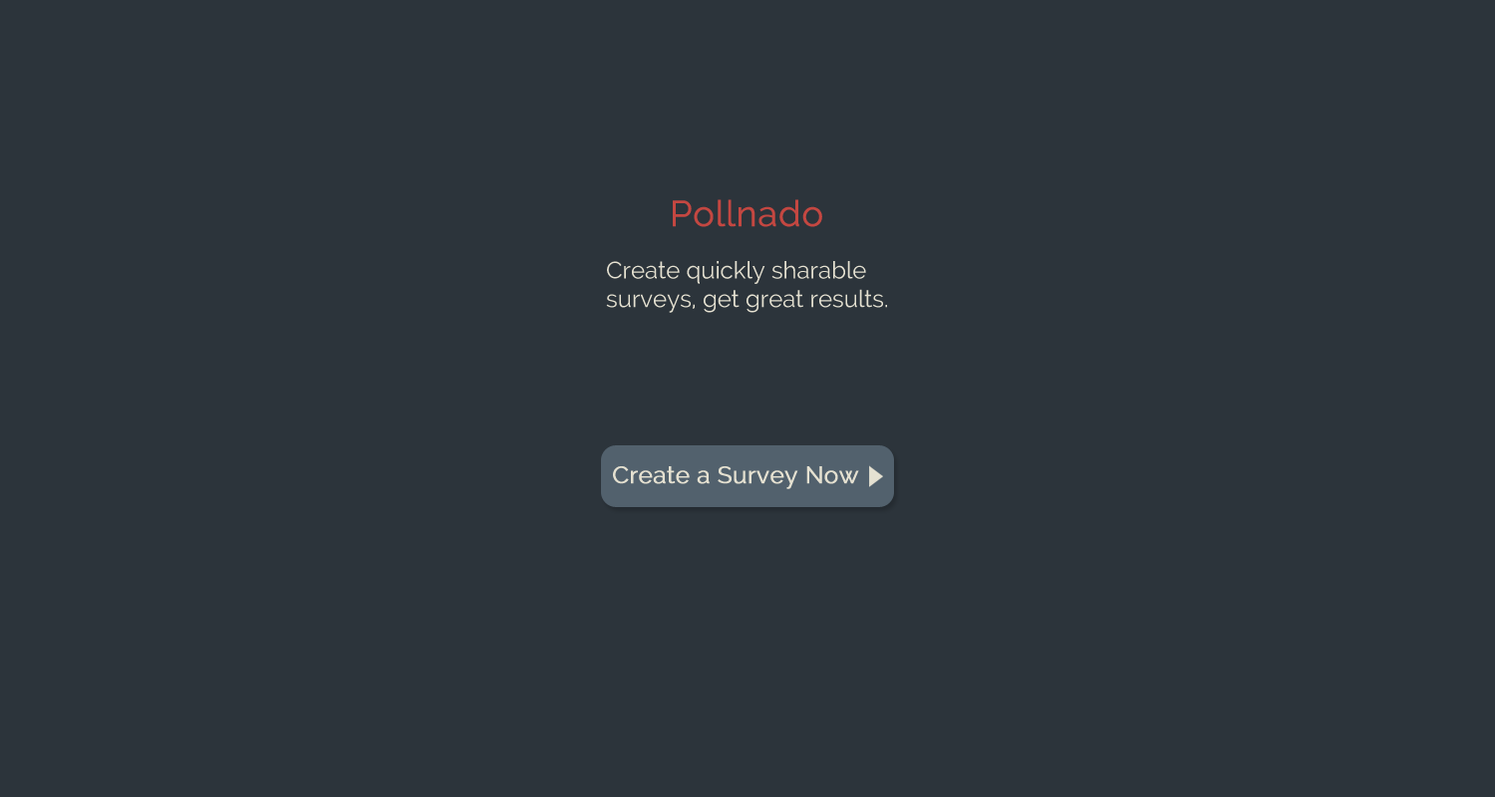
<style>
.page{position:relative;width:1495px;height:797px;background:#2c343b}
.page>*{position:absolute;margin:0}
.t1{font:35.9px "Raleway";color:#c44741;font-weight:bold}
.t2{font:23.9px "Raleway";color:#e5e1d1}
.t3{font:23.9px "Raleway";color:#e5e1d1;font-weight:bold}
</style>
<div class="page">
<p class="t1" style="left:673px;top:199px;width:149px;height:28px">Pollnado</p>
<p class="t2" style="left:606px;top:261px;width:281px;height:52px">Create quickly sharable surveys, get great results.</p>
<p class="t3" style="left:613px;top:467px;width:246px;height:22px">Create a Survey Now</p>
</div>
